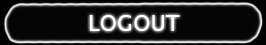
<style>
.page{position:relative;width:266px;height:45px;background:#050505}
.page>*{position:absolute;margin:0}
.t1{font:22.2px "LucidaSans";color:#ffffff}
</style>
<div class="page">
<p class="t1" style="left:89px;top:15px;width:91px;height:16px">LOGOUT</p>
</div>
